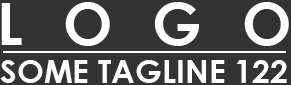
<style>
.page{position:relative;width:291px;height:85px;background:#333333}
.page>*{position:absolute;margin:0}
.t1{font:59px "CenturyGothic-Bold";letter-spacing:0.68em;color:#ffffff;text-transform:uppercase}
.t2{font:32px "CenturyGothic-Bold";color:#ffffff;text-transform:uppercase}
</style>
<div class="page">
<p class="t1" style="left:1px;top:2px;width:288px;height:44px">Logo</p>
<p class="t2" style="left:0px;top:60px;width:287px;height:23px">Some Tagline 122</p>
</div>
